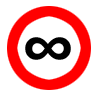
<style>
.page{position:relative;width:96px;height:96px;background:#ffffff}
.page>*{position:absolute;margin:0}
.t1{font:72px "CopperplateGothic-Bold";color:#000000}
</style>
<div class="page">
<p class="t1" style="left:25px;top:37px;width:46px;height:23px">∞</p>
</div>
